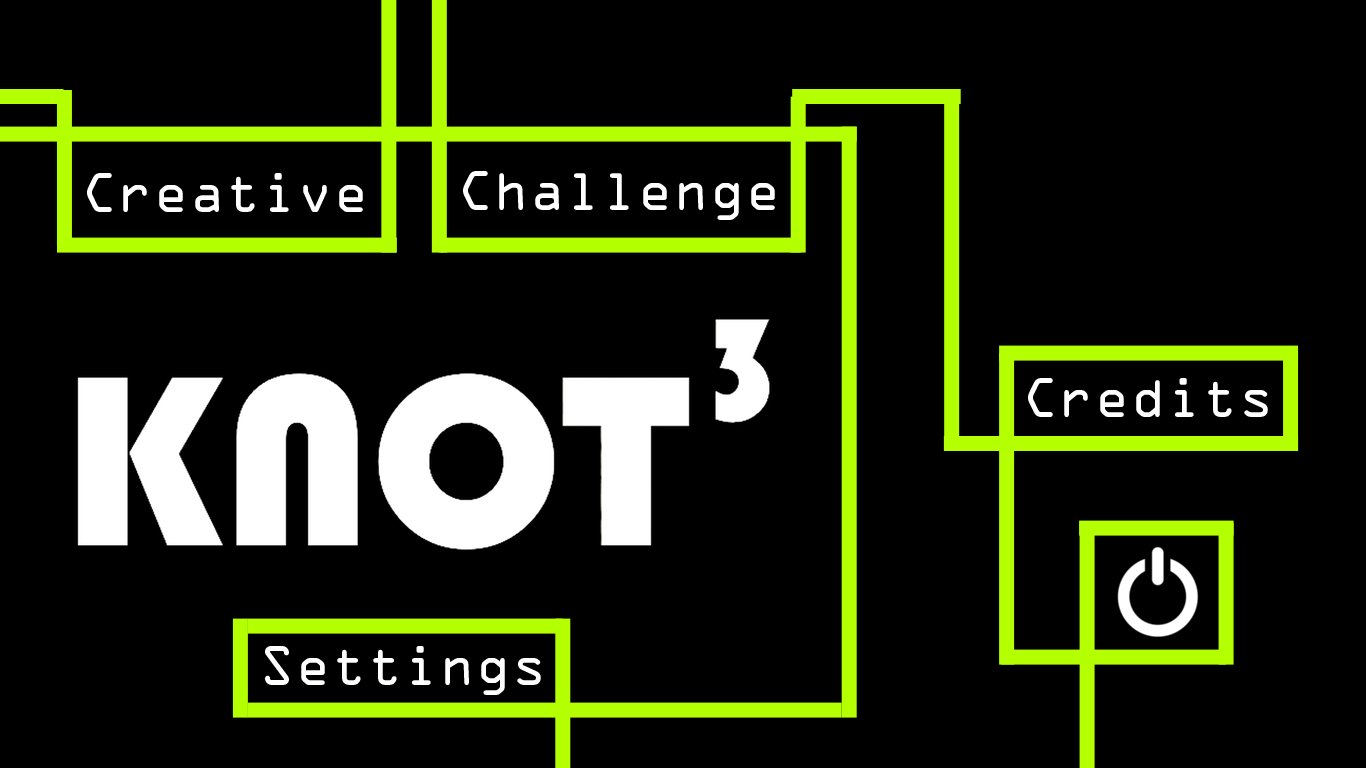
<style>
.page{position:relative;width:1366px;height:768px;background:#000000}
.page>*{position:absolute;margin:0}
.t1{font:50px "OCRAStd";color:#ffffff}
</style>
<div class="page">
<p class="t1" style="left:87px;top:173px;width:276px;height:39px">Creative</p>
<p class="t1" style="left:463px;top:171px;width:312px;height:49px">Challenge</p>
<p class="t1" style="left:1028px;top:378px;width:240px;height:39px">Credits</p>
<p class="t1" style="left:265px;top:646px;width:276px;height:49px">Settings</p>
</div>
